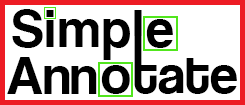
<style>
.page{position:relative;width:245px;height:105px;background:#ffffff}
.page>*{position:absolute;margin:0}
.t1{font:60px "Coolvetica-Regular";letter-spacing:0.04em;color:#000000}
.t2{font:60px "Coolvetica-Regular";color:#000000}
</style>
<div class="page">
<p class="t1" style="left:12px;top:9px;width:161px;height:51px">Simple</p>
<p class="t2" style="left:7px;top:57px;width:90px;height:37px">Ann</p>
<p class="t2" style="left:101px;top:65px;width:29px;height:29px">o</p>
<p class="t2" style="left:134px;top:58px;width:103px;height:36px">tate</p>
</div>
